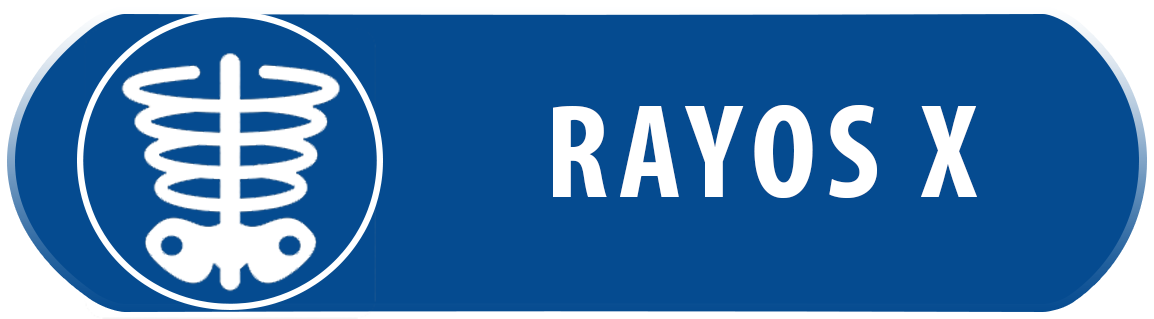
<style>
.page{position:relative;width:1154px;height:319px;background:#054b90}
.page>*{position:absolute;margin:0}
.t1{font:135.4px "MyriadPro-BoldCond";letter-spacing:0.075em;color:#ffffff;text-transform:uppercase}
.t2{font:122.9px "MyriadPro-BoldCond";letter-spacing:0.075em;color:#ffffff;text-transform:uppercase}
</style>
<div class="page">
<p class="t1" style="left:553px;top:105px;width:424px;height:94px"><span class="t2"><br></span>RAYOS X</p>
</div>
